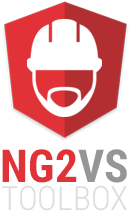
<style>
.page{position:relative;width:129px;height:215px;background:#ffffff}
.page>*{position:absolute;margin:0}
.t1{font:45.6px "RobotoCondensed-Bold";color:#e03237}
.t2{font:45.6px "RobotoCondensed-Bold";color:#969696}
.t3{font:33.4px "RobotoCondensed-Light";color:#dddddd}
</style>
<div class="page">
<p class="t1" style="left:2px;top:149px;width:125px;height:34px">NG2<span class="t2">VS</span></p>
<p class="t3" style="left:2px;top:185px;width:125px;height:26px">TOOLBOX</p>
</div>
